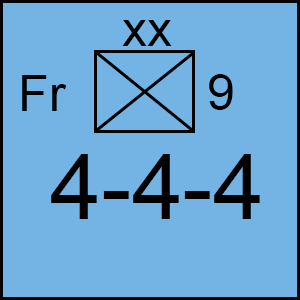
<style>
.page{position:relative;width:300px;height:300px;background:#74b4e4}
.page>*{position:absolute;margin:0}
.t1{font:50px "ArialMT";color:#000000}
.t2{font:91.7px "ArialMT";color:#000000}
</style>
<div class="page">
<p class="t1" style="left:122px;top:20px;width:50px;height:26px">xx</p>
<p class="t1" style="left:22px;top:75px;width:44px;height:36px">Fr</p>
<p class="t1" style="left:209px;top:74px;width:24px;height:36px">9</p>
<p class="t2" style="left:51px;top:154px;width:209px;height:65px">4-4-4</p>
</div>
